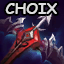
<style>
.page{position:relative;width:64px;height:64px}
.page>*{position:absolute;margin:0}
.t1{font:15px "ComicSansMS-Bold";color:#dcdcdc}
</style>
<div class="page">
<p class="t1" style="left:5px;top:3px;width:52px;height:11px">CHOIX</p>
</div>
